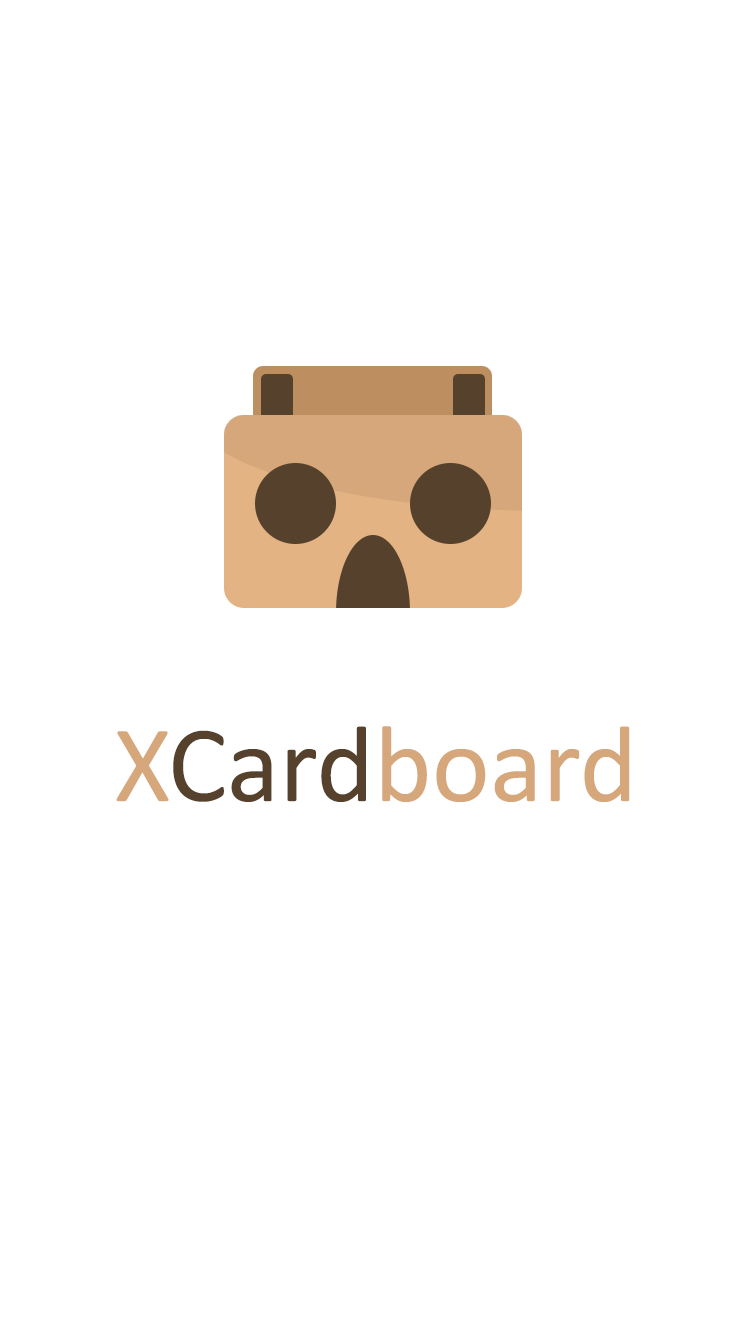
<style>
.page{position:relative;width:750px;height:1334px;background:#ffffff}
.page>*{position:absolute;margin:0}
.t1{font:110px "Calibri";color:#d6a77a}
.t2{font:110px "Calibri";color:#56422c}
</style>
<div class="page">
<p class="t1" style="left:116px;top:726px;width:514px;height:76px">X<span class="t2">Card</span>board</p>
</div>
